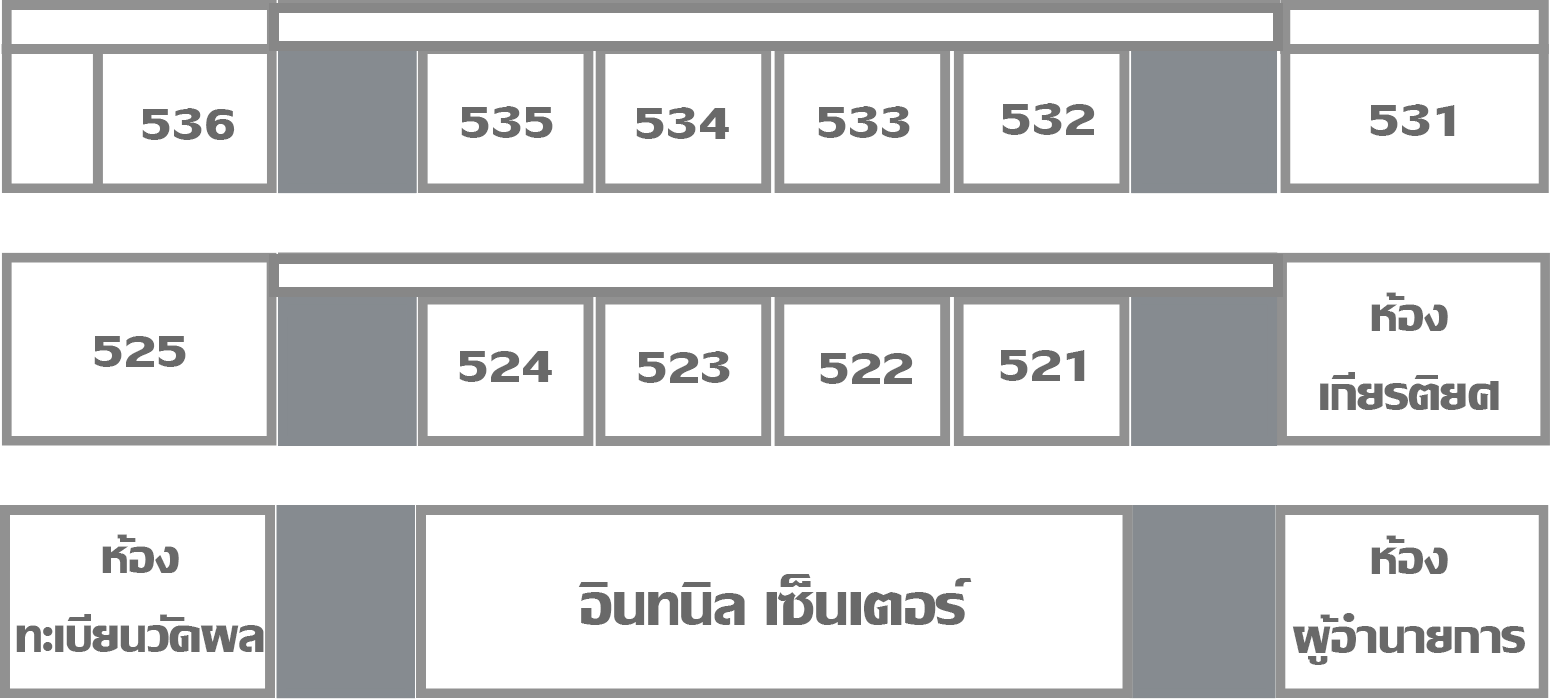
<style>
.page{position:relative;width:1550px;height:699px;background:#ffffff}
.page>*{position:absolute;margin:0}
.t1{font:65.8px "LilyUPCBold";color:#696969}
.t2{font:66.4px "LilyUPCBold";color:#696969}
.t3{font:81.8px "LilyUPCBold";color:#696969}
</style>
<div class="page">
<p class="t1" style="left:142px;top:108px;width:93px;height:32px">536</p>
<p class="t1" style="left:461px;top:106px;width:92px;height:32px">535</p>
<p class="t1" style="left:636px;top:107px;width:93px;height:32px">534</p>
<p class="t1" style="left:818px;top:106px;width:92px;height:32px">533</p>
<p class="t1" style="left:1002px;top:103px;width:93px;height:32px">532</p>
<p class="t1" style="left:1370px;top:104px;width:85px;height:32px">531</p>
<p class="t1" style="left:1320px;top:292px;width:179px;height:118px;text-align:center">ห้อง<br>เกียรติยศ</p>
<p class="t1" style="left:94px;top:336px;width:92px;height:31px">525</p>
<p class="t2" style="left:459px;top:351px;width:93px;height:31px">524</p>
<p class="t1" style="left:638px;top:351px;width:92px;height:32px">523</p>
<p class="t1" style="left:820px;top:353px;width:93px;height:31px">522</p>
<p class="t1" style="left:1000px;top:350px;width:85px;height:31px">521</p>
<p class="t1" style="left:16px;top:534px;width:248px;height:118px;text-align:center">ห้อง<br>ทะเบียนวัดผล</p>
<p class="t1" style="left:1292px;top:535px;width:233px;height:130px;text-align:center">ห้อง<br>ผู้อำนายการ</p>
<p class="t3" style="left:578px;top:574px;width:394px;height:51px">อินทนิล เซ็นเตอร์</p>
</div>
